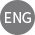
<style>
.page{position:relative;width:35px;height:35px;background:#7a7a7c}
.page>*{position:absolute;margin:0}
.t1{font:14px "NotoSansKR-Regular";color:#ffffff}
</style>
<div class="page">
<p class="t1" style="left:5px;top:12px;width:26px;height:11px">ENG</p>
</div>
